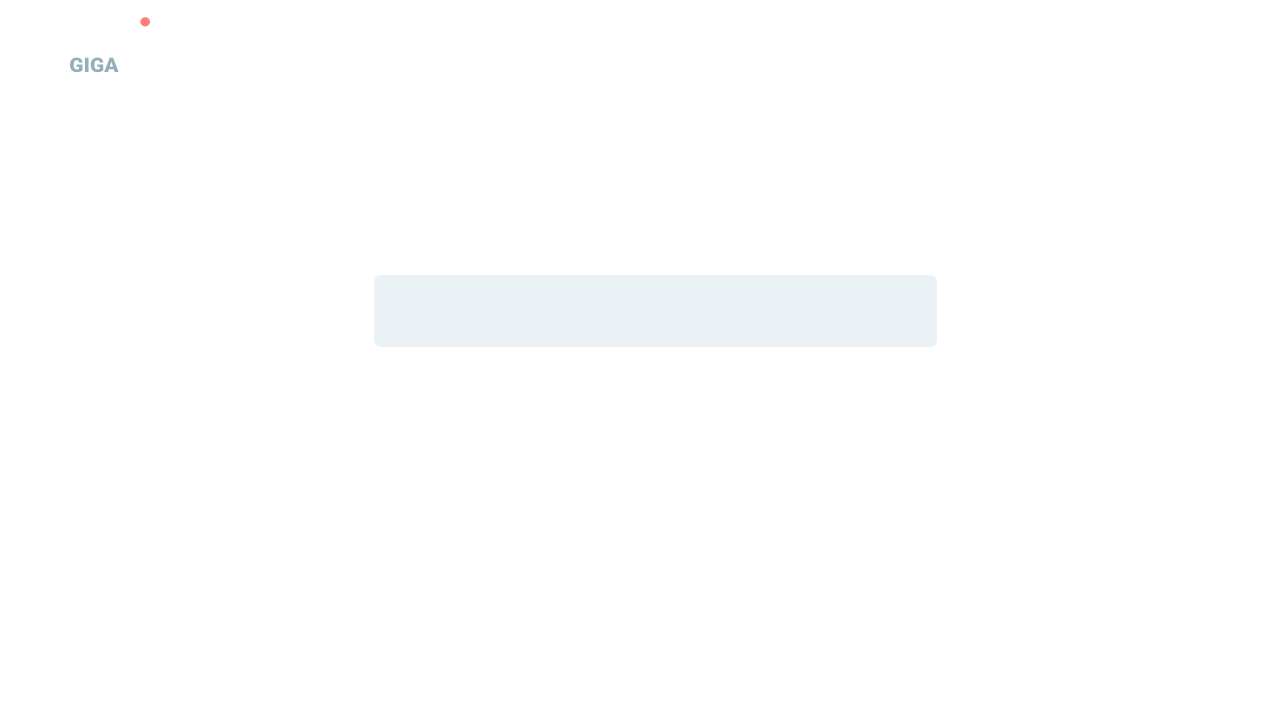
<style>
.page{position:relative;width:1280px;height:720px;background:#ffffff}
.page>*{position:absolute;margin:0}
.t1{font:20px "Roboto-Black";color:#92afba;scale:1.05 1}
</style>
<div class="page">
<p class="t1" style="left:70px;top:57px;width:49px;height:16px">GIGA</p>
</div>
